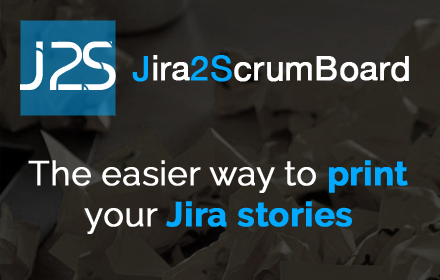
<style>
.page{position:relative;width:440px;height:280px}
.page>*{position:absolute;margin:0}
.t1{font:66.5px "Skynet.Enterprise";letter-spacing:-0.075em;color:#ffffff;text-transform:uppercase}
.t2{font:34px "HelveticaNeue";color:#ffffff;font-weight:bold}
.t3{font:34px "HelveticaNeue";color:#01aaff;font-weight:bold}
.t4{font:34px "HelveticaNeue";color:#01a9fe;font-weight:bold}
.t5{font:34px "Raleway-Regular";color:#ffffff;font-weight:bold}
.t6{font:34px "Raleway-Bold";color:#01aaff;font-weight:bold}
</style>
<div class="page">
<p class="t1" style="left:20px;top:41px;width:96px;height:49px">J2S</p>
<p class="t2" style="left:132px;top:55px;width:277px;height:27px"><span class="t3">J</span>ira<span class="t4">2S</span>crumBoard</p>
<p class="t5" style="left:28px;top:160px;width:380px;height:74px;text-align:center">The easier way to <span class="t6">print<br></span>your <span class="t6">Jira stories</span></p>
</div>
